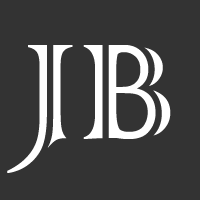
<style>
.page{position:relative;width:200px;height:200px;background:#333333}
.page>*{position:absolute;margin:0}
.t1{font:179.7px "ColonnaMT";color:#ffffff}
</style>
<div class="page">
<p class="t1" style="left:7px;top:45px;width:164px;height:128px">JB</p>
</div>
